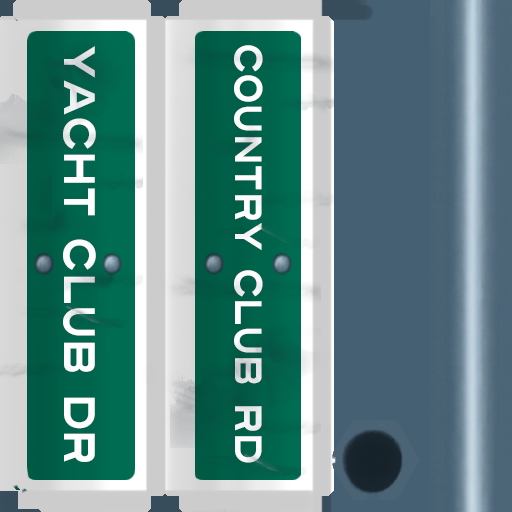
<style>
.page{position:relative;width:512px;height:512px}
.page>*{position:absolute;margin:0}
.t1{font:44px "Turnpike";color:#fefeff;scale:0.75 1}
.t2{font:38px "Turnpike";color:#fefeff;scale:0.75 1}
</style>
<div class="page">
<p class="t1" style="left:63px;top:46px;width:33px;height:416px;rotate:90deg">Yacht Club Dr</p>
<p class="t2" style="left:234px;top:45px;width:29px;height:418px;rotate:90deg">Country Club Rd</p>
</div>
